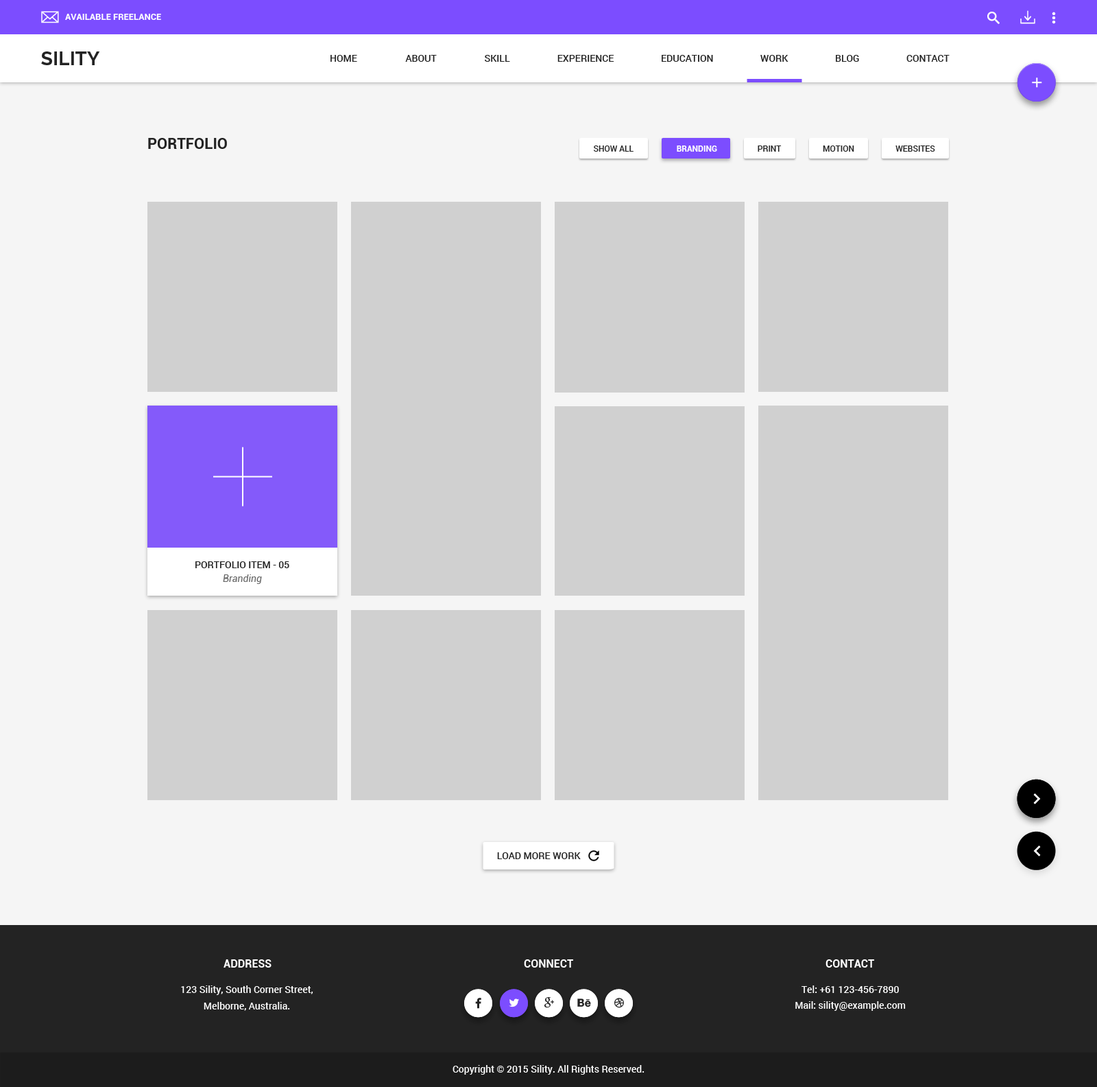
<style>
.page{position:relative;width:1097px;height:1087px;background:#f5f5f5}
.page>*{position:absolute;margin:0}
.t1{font:8.9px "Roboto-Bold";color:#ffffff;text-transform:uppercase}
.t2{font:19.2px "Raleway-Bold";color:#232323}
.t3{font:9.6px "Roboto-Medium";color:#232323;text-transform:uppercase}
.t4{font:15.1px "Roboto-Bold";color:#232323}
.t5{font:8.2px "Roboto-Medium";color:#232323;text-transform:uppercase}
.t6{font:8.2px "Roboto-Bold";color:#ffffff;text-transform:uppercase}
.t7{font:9.6px "Roboto-Medium";color:#232323}
.t8{font:9.6px "Roboto-Italic";color:#666666}
.t9{font:11px "Roboto-Bold";color:#ffffff;text-transform:uppercase}
.t10{font:9.6px/16.5px "Roboto-Medium";color:#ffffff}
.t11{font:9.6px "Roboto-Medium";color:#ffffff}
</style>
<div class="page">
<p class="t1" style="left:65px;top:14px;width:96px;height:6px">available freelance</p>
<p class="t2" style="left:41px;top:51px;width:59px;height:14px">SILITY</p>
<p class="t3" style="left:331px;top:55px;width:26px;height:7px">home</p>
<p class="t3" style="left:405px;top:55px;width:32px;height:7px">about</p>
<p class="t3" style="left:485px;top:55px;width:25px;height:7px">skill</p>
<p class="t3" style="left:558px;top:55px;width:57px;height:7px">experience</p>
<p class="t3" style="left:662px;top:55px;width:51px;height:7px">education</p>
<p class="t3" style="left:761px;top:55px;width:28px;height:7px">work</p>
<p class="t3" style="left:836px;top:55px;width:23px;height:7px">blog</p>
<p class="t3" style="left:907px;top:55px;width:43px;height:7px">Contact</p>
<p class="t4" style="left:148px;top:138px;width:79px;height:11px">PORTFOLIO</p>
<p class="t5" style="left:594px;top:145px;width:40px;height:7px">show all</p>
<p class="t6" style="left:677px;top:145px;width:40px;height:7px">Branding</p>
<p class="t5" style="left:758px;top:145px;width:24px;height:7px">print</p>
<p class="t5" style="left:823px;top:145px;width:32px;height:7px">motion</p>
<p class="t5" style="left:896px;top:145px;width:40px;height:7px">websites</p>
<p class="t7" style="left:195px;top:561px;width:94px;height:7px">PORTFOLIO ITEM - 05</p>
<p class="t8" style="left:223px;top:574px;width:39px;height:10px">Branding</p>
<p class="t7" style="left:497px;top:852px;width:84px;height:7px">LOAD MORE WORK</p>
<p class="t9" style="left:224px;top:959px;width:48px;height:8px">Address</p>
<p class="t9" style="left:524px;top:959px;width:49px;height:8px">connect</p>
<p class="t9" style="left:826px;top:959px;width:49px;height:8px">contact</p>
<p class="t10" style="left:181px;top:985px;width:132px;height:25px;text-align:center">123 Sility, South Corner Street,<br>Melborne, Australia.</p>
<p class="t11" style="left:802px;top:985px;width:97px;height:8px">Tel: +61 123-456-7890</p>
<p class="t11" style="left:796px;top:1001px;width:110px;height:9px">Mail: sility@example.com</p>
<p class="t11" style="left:453px;top:1065px;width:192px;height:9px">Copyright © 2015 Sility. All Rights Reserved.</p>
</div>
